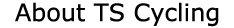
<style>
.page{position:relative;width:234px;height:28px;background:#ffffff}
.page>*{position:absolute;margin:0}
.t1{font:24px "Verdana";color:#030201}
</style>
<div class="page">
<p class="t1" style="left:15px;top:2px;width:204px;height:25px">About TS Cycling</p>
</div>
